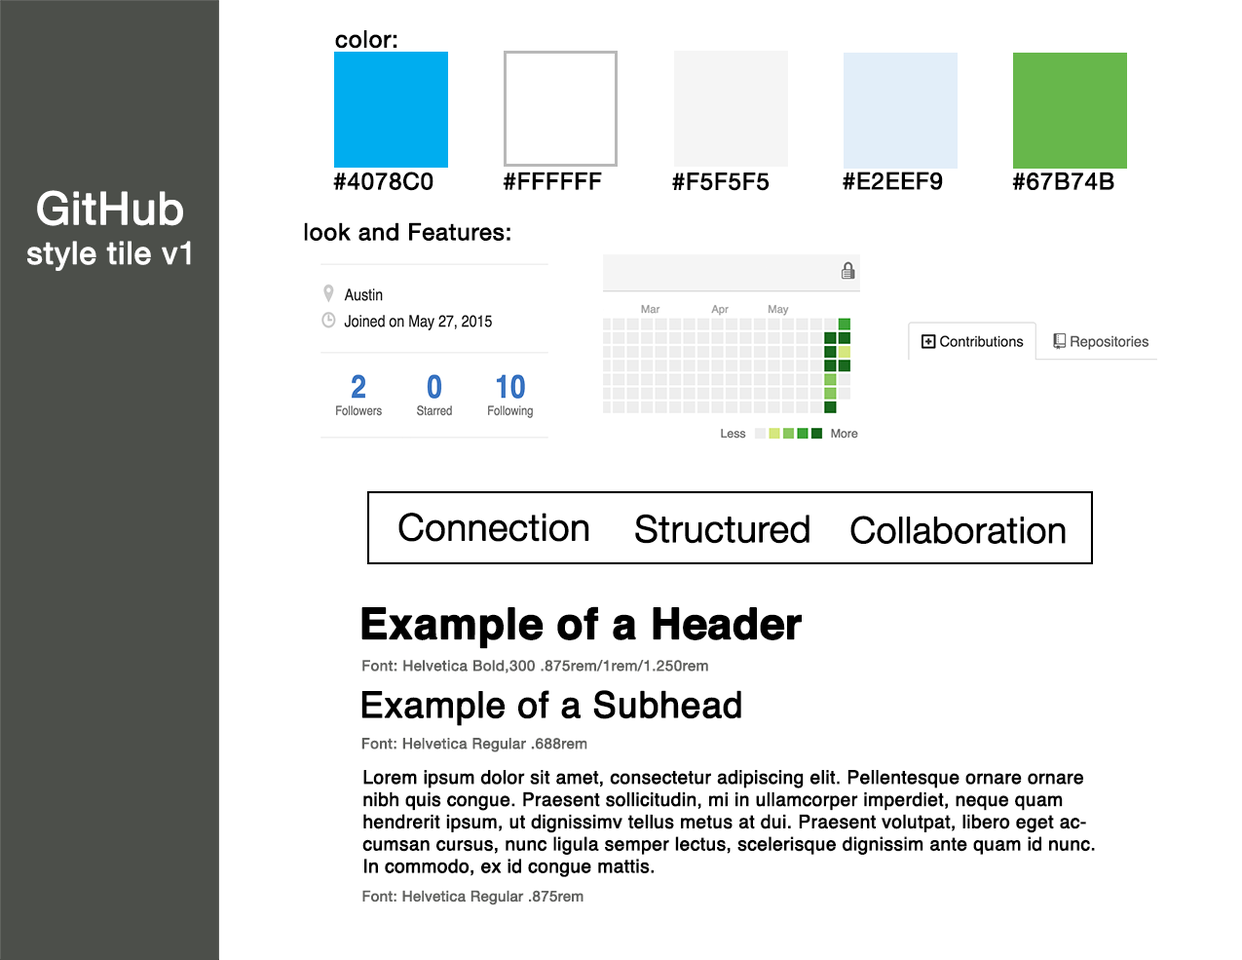
<style>
.page{position:relative;width:1242px;height:960px;background:#ffffff}
.page>*{position:absolute;margin:0}
.t1{font:23.4px "HelveticaNeue";letter-spacing:0.01em;color:#000000;font-weight:bold}
.t2{font:44.8px "HelveticaNeue";color:#ffffff;font-weight:bold}
.t3{font:46.8px "HelveticaNeue";color:#ffffff;font-weight:bold}
.t4{font:31.2px "HelveticaNeue";letter-spacing:0.01em;color:#ffffff;font-weight:bold}
.t5{font:37px "HelveticaNeue-Light";color:#000000;font-weight:bold}
.t6{font:36.1px "HelveticaNeue-Light";color:#000000;font-weight:bold}
.t7{font:42.9px "Helvetica-Bold";color:#000000;font-weight:bold}
.t8{font:14.6px "HelveticaNeue";letter-spacing:0.01em;color:#5f605e;font-weight:bold}
.t9{font:36.1px "Helvetica";color:#000000;font-weight:bold}
.t10{font:18.5px "Helvetica";color:#000000;font-weight:bold}
.t11{font:14.6px "HelveticaNeue";color:#5f605e;font-weight:bold}
</style>
<div class="page">
<p class="t1" style="left:335px;top:30px;width:63px;height:19px">color:</p>
<p class="t1" style="left:333px;top:171px;width:101px;height:20px">#4078C0</p>
<p class="t1" style="left:503px;top:171px;width:99px;height:19px">#FFFFFF</p>
<p class="t1" style="left:672px;top:172px;width:98px;height:19px">#F5F5F5</p>
<p class="t1" style="left:843px;top:171px;width:100px;height:19px">#E2EEF9</p>
<p class="t1" style="left:1012px;top:171px;width:103px;height:19px">#67B74B</p>
<p class="t2" style="left:37px;top:190px;width:146px;height:36px"><span class="t3"><br></span>GitHub</p>
<p class="t1" style="left:304px;top:222px;width:207px;height:19px">look and Features:</p>
<p class="t4" style="left:27px;top:241px;width:164px;height:30px">style tile v1</p>
<p class="t5" style="left:399px;top:513px;width:191px;height:29px">Connection</p>
<p class="t5" style="left:635px;top:514px;width:175px;height:30px">Structured</p>
<p class="t6" style="left:851px;top:515px;width:215px;height:29px">Collaboration</p>
<p class="t7" style="left:362px;top:606px;width:440px;height:43px">Example of a Header</p>
<p class="t8" style="left:362px;top:660px;width:346px;height:13px">Font: Helvetica Bold,300 .875rem/1rem/1.250rem</p>
<p class="t9" style="left:362px;top:690px;width:380px;height:36px">Example of a Subhead</p>
<p class="t8" style="left:362px;top:738px;width:226px;height:14px">Font: Helvetica Regular .688rem</p>
<p class="t10" style="left:362px;top:770px;width:733px;height:107px">Lorem ipsum dolor sit amet, consectetur adipiscing elit. Pellentesque ornare ornare nibh quis congue. Praesent sollicitudin, mi in ullamcorper imperdiet, neque quam hendrerit ipsum, ut dignissimv tellus metus at dui. Praesent volutpat, libero eget accumsan cursus, nunc ligula semper lectus, scelerisque dignissim ante quam id nunc. In commodo, ex id congue mattis.</p>
<p class="t11" style="left:362px;top:890px;width:222px;height:15px">Font: Helvetica Regular .875rem</p>
</div>
